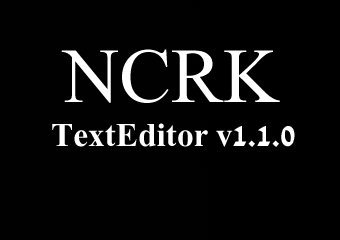
<style>
.page{position:relative;width:340px;height:240px;background:#010101}
.page>*{position:absolute;margin:0}
.t1{font:77.8px "FrankRuehl";color:#ffffff}
.t2{font:33.3px "David-Bold";color:#ffffff}
</style>
<div class="page">
<p class="t1" style="left:61px;top:49px;width:219px;height:54px">NCRK</p>
<p class="t2" style="left:52px;top:123px;width:243px;height:24px">TextEditor v1.1.0</p>
</div>
